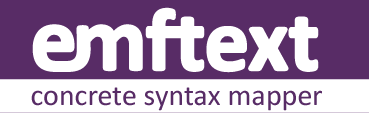
<style>
.page{position:relative;width:369px;height:113px;background:#582c66}
.page>*{position:absolute;margin:0}
.t1{font:30px "Calibri";color:#582c66}
</style>
<div class="page">
<p class="t1" style="left:31px;top:87px;width:291px;height:24px">concrete syntax mapper</p>
</div>
